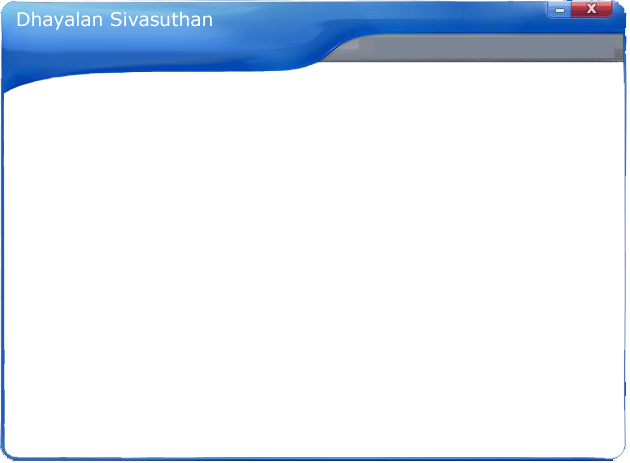
<style>
.page{position:relative;width:630px;height:463px;background:#ffffff}
.page>*{position:absolute;margin:0}
.t1{font:18.7px "Verdana";color:#ffffff}
</style>
<div class="page">
<p class="t1" style="left:17px;top:11px;width:195px;height:19px">Dhayalan Sivasuthan</p>
</div>
